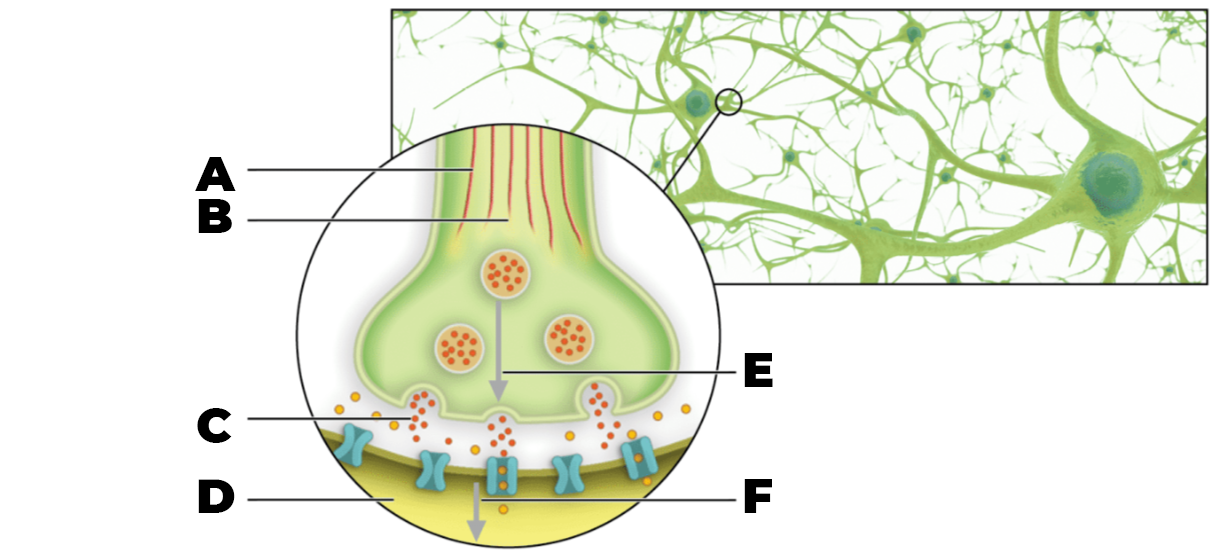
<style>
.page{position:relative;width:1223px;height:559px;background:#ffffff}
.page>*{position:absolute;margin:0}
.t1{font:48px/14px "Montserrat-Black";color:#000000}
</style>
<div class="page">
<p class="t1" style="left:195px;top:157px;width:41px;height:356px">A<br><br><br>B<br><br><br><br><br><br><br><br><br><br><br><br><br><br><br>C<br><br><br><br><br>D</p>
<p class="t1" style="left:744px;top:353px;width:29px;height:160px">E<br><br><br><br><br><br><br><br><br>F</p>
</div>
